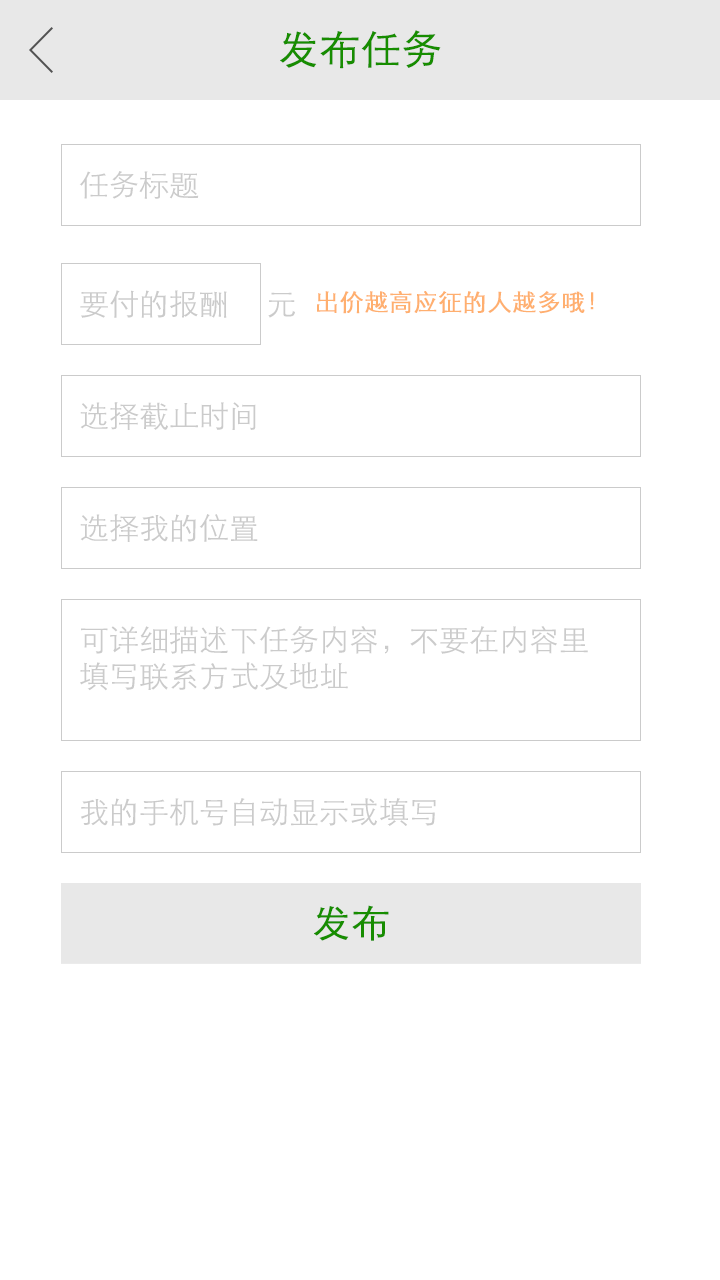
<style>
.page{position:relative;width:720px;height:1280px;background:#ffffff}
.page>*{position:absolute;margin:0}
.t1{font:40px "STXihei";color:#178d00;font-weight:bold}
.t2{font:30px "STXihei";color:#cbcbcb}
.t3{font:24px "STXihei";color:#ffaf6f;font-weight:bold}
.t4{font:30px/36px "STXihei";color:#cbcbcb}
.t5{font:38px "STXihei";color:#178d00;font-weight:bold}
</style>
<div class="page">
<p class="t1" style="left:280px;top:30px;width:161px;height:39px">发布任务</p>
<p class="t2" style="left:79px;top:171px;width:120px;height:28px">任务标题</p>
<p class="t2" style="left:80px;top:290px;width:215px;height:28px">要付的报酬     元</p>
<p class="t3" style="left:317px;top:291px;width:277px;height:23px">出价越高应征的人越多哦！</p>
<p class="t2" style="left:80px;top:402px;width:176px;height:28px">选择截止时间</p>
<p class="t2" style="left:80px;top:514px;width:178px;height:28px">选择我的位置</p>
<p class="t4" style="left:80px;top:626px;width:508px;height:65px;text-align:justify">可详细描述下任务内容，不要在内容里<br>填写联系方式及地址</p>
<p class="t2" style="left:81px;top:798px;width:355px;height:28px">我的手机号自动显示或填写</p>
<p class="t5" style="left:314px;top:905px;width:75px;height:36px">发布</p>
</div>
